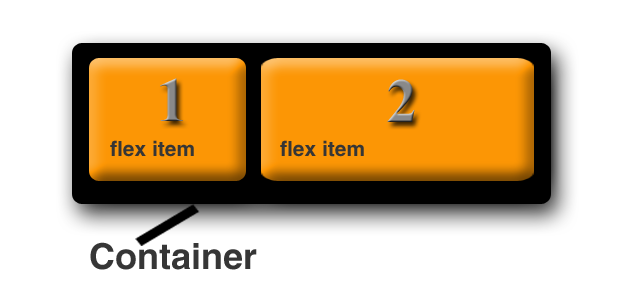
<style>
.page{position:relative;width:634px;height:306px;background:#ffffff}
.page>*{position:absolute;margin:0}
.t1{font:63px "TimesNewRomanPS-BoldMT";color:#898989}
.t2{font:63px "TimesNewRomanPS-BoldMT"}
.t3{font:21px "HelveticaLTStd-Bold";color:#363636}
.t4{font:36px "HelveticaLTStd-Bold";color:#363636}
</style>
<div class="page">
<p class="t1" style="left:160px;top:78px;width:23px;height:43px">1</p>
<p class="t2" style="left:387px;top:79px;width:28px;height:43px">2</p>
<p class="t3" style="left:110px;top:140px;width:84px;height:17px">flex item</p>
<p class="t3" style="left:280px;top:140px;width:84px;height:17px">flex item</p>
<p class="t4" style="left:90px;top:242px;width:167px;height:28px">Container</p>
</div>
